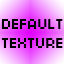
<style>
.page{position:relative;width:64px;height:64px}
.page>*{position:absolute;margin:0}
.t1{font:16.1px "04b03";color:#000000}
</style>
<div class="page">
<p class="t1" style="left:1px;top:19px;width:62px;height:29px">DEFAULT<br>TEXTURE</p>
</div>
